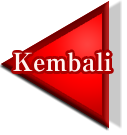
<style>
.page{position:relative;width:127px;height:135px;background:#ffffff}
.page>*{position:absolute;margin:0}
.t1{font:25px "RyuminPro-ExBold";color:#fff5f1}
</style>
<div class="page">
<p class="t1" style="left:13px;top:52px;width:99px;height:20px">Kembali</p>
</div>
